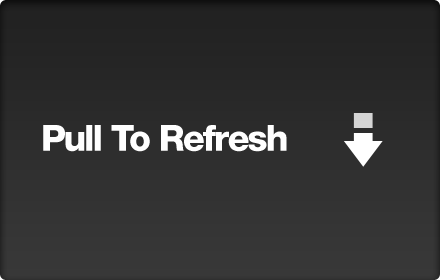
<style>
.page{position:relative;width:440px;height:280px}
.page>*{position:absolute;margin:0}
.t1{font:36px "HelveticaNeueLTCom-Hv";letter-spacing:-0.05em;color:#ffffff}
</style>
<div class="page">
<p class="t1" style="left:43px;top:125px;width:244px;height:27px">Pull To Refresh</p>
</div>
